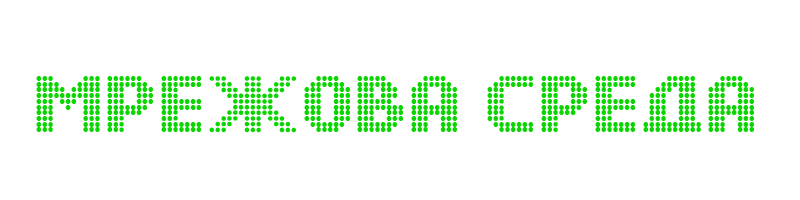
<style>
.page{position:relative;width:800px;height:200px;background:#ffffff}
.page>*{position:absolute;margin:0}
.t1{font:72px "DSDots-Medium";letter-spacing:0.015em;color:#0ad500}
</style>
<div class="page">
<p class="t1" style="left:36px;top:76px;width:718px;height:57px">Мрежова среда</p>
</div>
